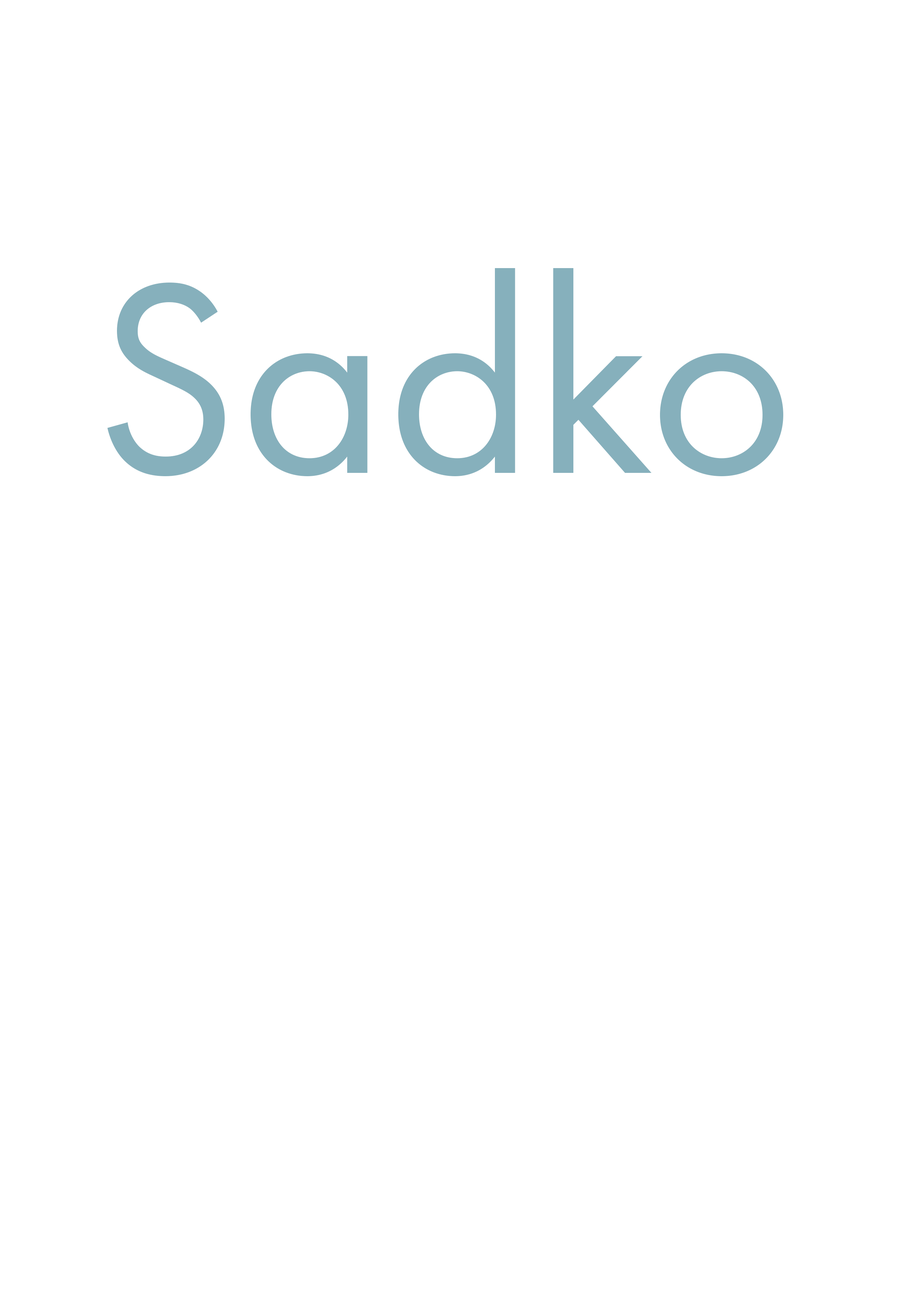
<style>
.page{position:relative;width:918px;height:1299px;background:#ffffff}
.page>*{position:absolute;margin:0}
.t1{font:280.8px "FuturaPT-Book";color:#86b0bc}
</style>
<div class="page">
<p class="t1" style="left:107px;top:268px;width:676px;height:208px">Sadko</p>
</div>
